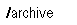
<style>
.page{position:relative;width:77px;height:25px;background:#ffffff}
.page>*{position:absolute;margin:0}
.t1{font:16px "ArialNarrow";color:#000000}
.t2{font:16px "ArialNarrow";color:#000000;font-weight:bold}
</style>
<div class="page">
<p class="t1" style="left:6px;top:7px;width:47px;height:11px"><span class="t2">/</span>archive</p>
</div>
